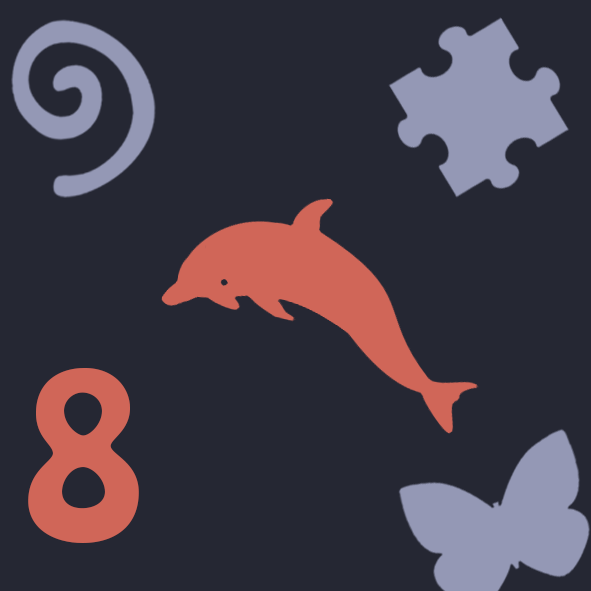
<style>
.page{position:relative;width:591px;height:591px;background:#252733}
.page>*{position:absolute;margin:0}
.t1{font:208.3px "HoboStd";color:#d06658}
</style>
<div class="page">
<p class="t1" style="left:28px;top:368px;width:111px;height:175px">8</p>
</div>
